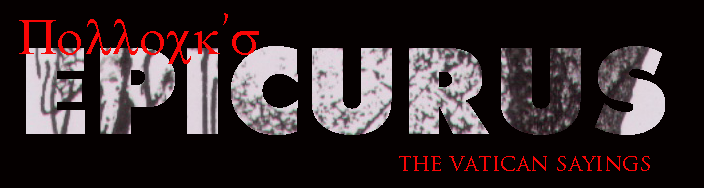
<style>
.page{position:relative;width:704px;height:188px;background:#050000}
.page>*{position:absolute;margin:0}
.t1{font:116.7px "Thehits"}
.t2{font:22.2px "TrajanPro-Regular";color:#f80505}
</style>
<div class="page">
<p class="t1" style="left:26px;top:46px;width:639px;height:89px">EPICURUS</p>
<p class="t2" style="left:399px;top:156px;width:251px;height:15px">the vatican sayings</p>
</div>
